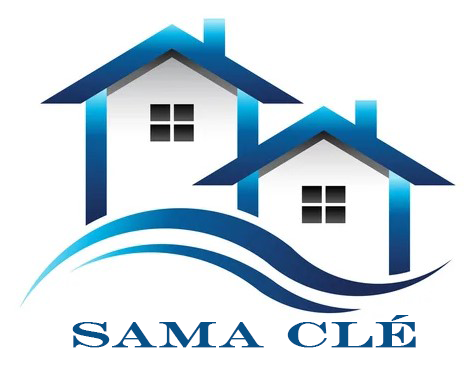
<style>
.page{position:relative;width:468px;height:389px;background:#ffffff}
.page>*{position:absolute;margin:0}
.t1{font:36.7px "EngraversMT";letter-spacing:0.01em;color:#075087;font-weight:bold;scale:1.41 1}
</style>
<div class="page">
<p class="t1" style="left:72px;top:315px;width:344px;height:33px">sama clé</p>
</div>
